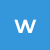
<style>
.page{position:relative;width:50px;height:50px;background:#3497db}
.page>*{position:absolute;margin:0}
.t1{font:24.8px "Montserrat-Regular";color:#ffffff}
</style>
<div class="page">
<p class="t1" style="left:14px;top:19px;width:23px;height:14px">w</p>
</div>
